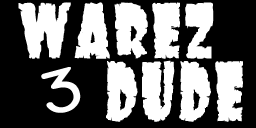
<style>
.page{position:relative;width:256px;height:128px;background:#000000}
.page>*{position:absolute;margin:0}
.t1{font:75.5px "DSSonOf-Black";color:#ffffff;font-weight:bold;scale:0.7 1}
.t2{font:81.6px "DSSonOf-Black";color:#ffffff;font-weight:bold;scale:0.65 1}
.t3{font:62.3px "TechnicBold";color:#ffffff;font-weight:bold;scale:1.32 1}
</style>
<div class="page">
<p class="t1" style="left:18px;top:2px;width:196px;height:57px">Warez</p>
<p class="t2" style="left:106px;top:60px;width:137px;height:62px">Dude</p>
<p class="t3" style="left:41px;top:67px;width:40px;height:46px;rotate:-15deg">3</p>
</div>
